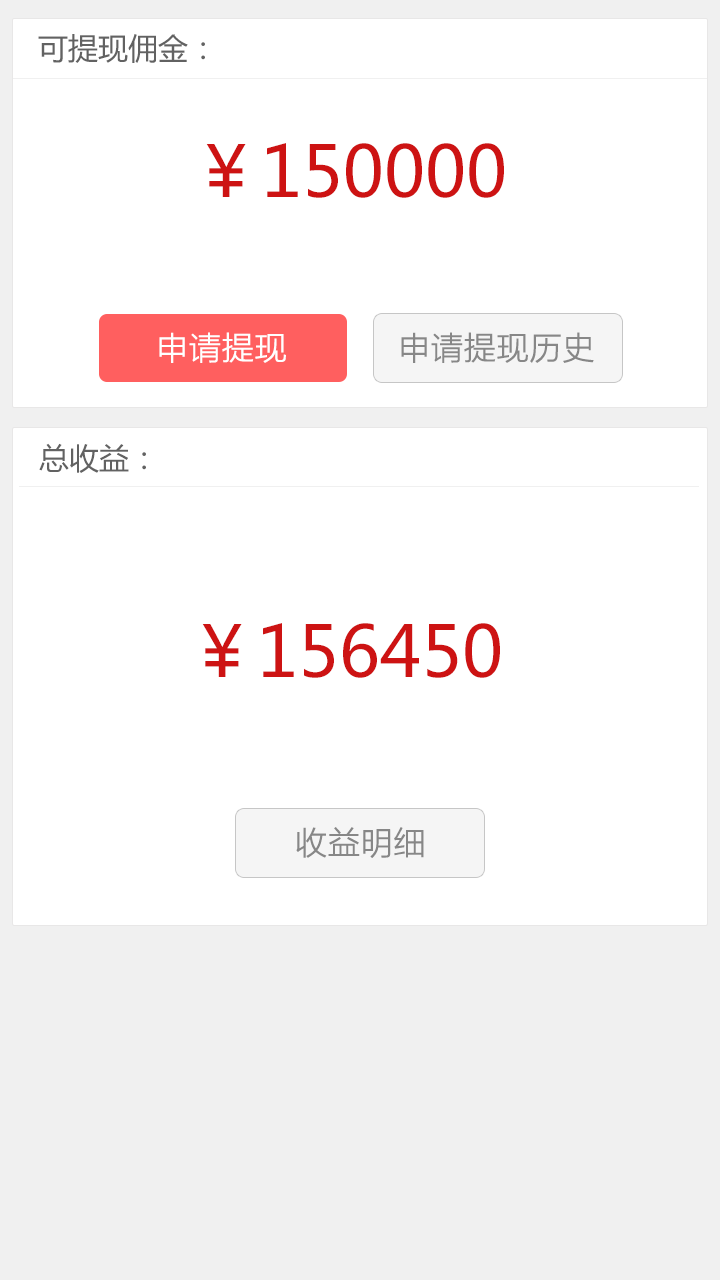
<style>
.page{position:relative;width:720px;height:1280px;background:#ffffff}
.page>*{position:absolute;margin:0}
.t1{font:30px "MicrosoftYaHei";color:#626262;text-transform:uppercase}
.t2{font:70px "MicrosoftYaHei";color:#cd1313}
.t3{font:32px "FZLTXHK--GBK1-0";color:#ffffff;text-transform:uppercase;font-weight:bold}
.t4{font:32px "FZLTXHK--GBK1-0";color:#878787;text-transform:uppercase;font-weight:bold}
</style>
<div class="page">
<p class="t1" style="left:38px;top:34px;width:167px;height:29px">可提现佣金：</p>
<p class="t2" style="left:206px;top:143px;width:298px;height:55px">￥150000</p>
<p class="t3" style="left:159px;top:332px;width:127px;height:31px">申请提现</p>
<p class="t4" style="left:401px;top:332px;width:193px;height:31px">申请提现历史</p>
<p class="t1" style="left:39px;top:443px;width:107px;height:30px">总收益：</p>
<p class="t2" style="left:202px;top:623px;width:298px;height:55px">￥156450</p>
<p class="t4" style="left:296px;top:827px;width:128px;height:31px">收益明细</p>
</div>
